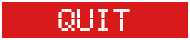
<style>
.page{position:relative;width:190px;height:40px;background:#d81a1a}
.page>*{position:absolute;margin:0}
.t1{font:30px "ElectronicHighwaySign";color:#ffffff}
</style>
<div class="page">
<p class="t1" style="left:58px;top:9px;width:72px;height:22px">QUIT</p>
</div>
